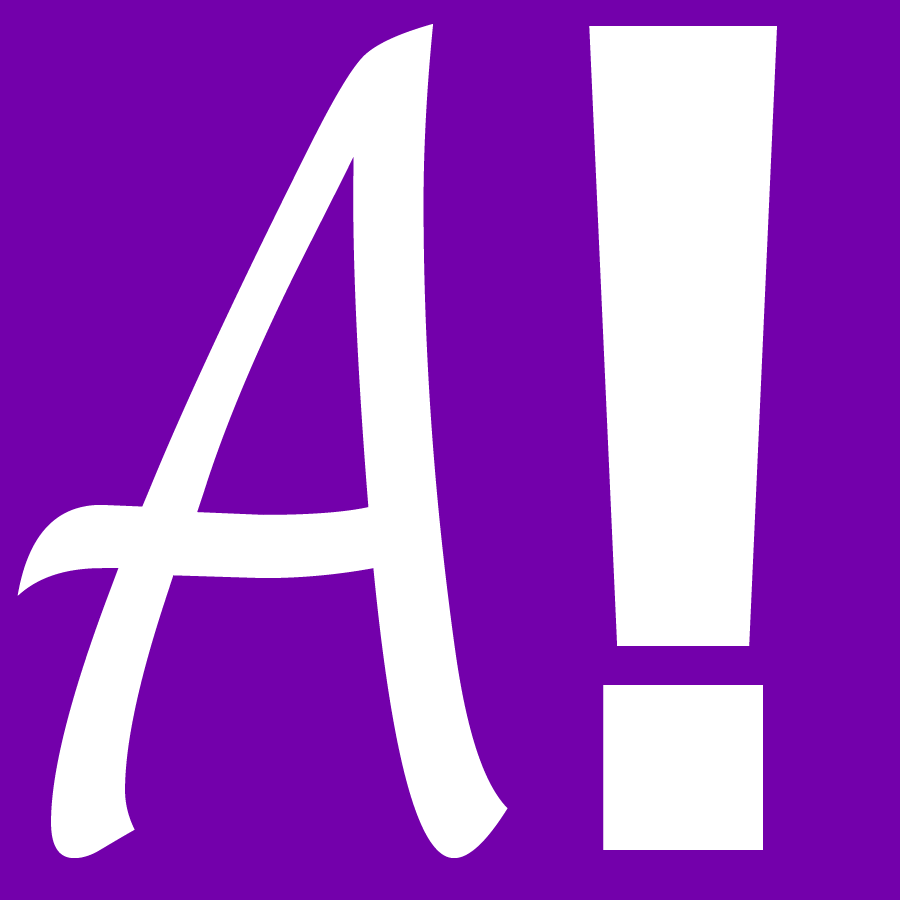
<style>
.page{position:relative;width:900px;height:900px;background:#7300ab}
.page>*{position:absolute;margin:0}
.t1{font:1093.7px "LucidaHandwriting-Italic";color:#ffffff;scale:0.62 1}
.t2{font:1041.7px "Impact";color:#ffffff;scale:0.83 1}
</style>
<div class="page">
<p class="t1" style="left:17px;top:24px;width:491px;height:834px">A</p>
<p class="t2" style="left:589px;top:26px;width:188px;height:824px">!</p>
</div>
